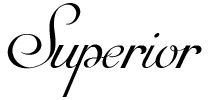
<style>
.page{position:relative;width:210px;height:100px;background:#ffffff}
.page>*{position:absolute;margin:0}
.t1{font:83.3px "MirellaScriptLimitedFreeVersion.vfb";color:#000000}
</style>
<div class="page">
<p class="t1" style="left:7px;top:3px;width:195px;height:94px">Superior</p>
</div>
